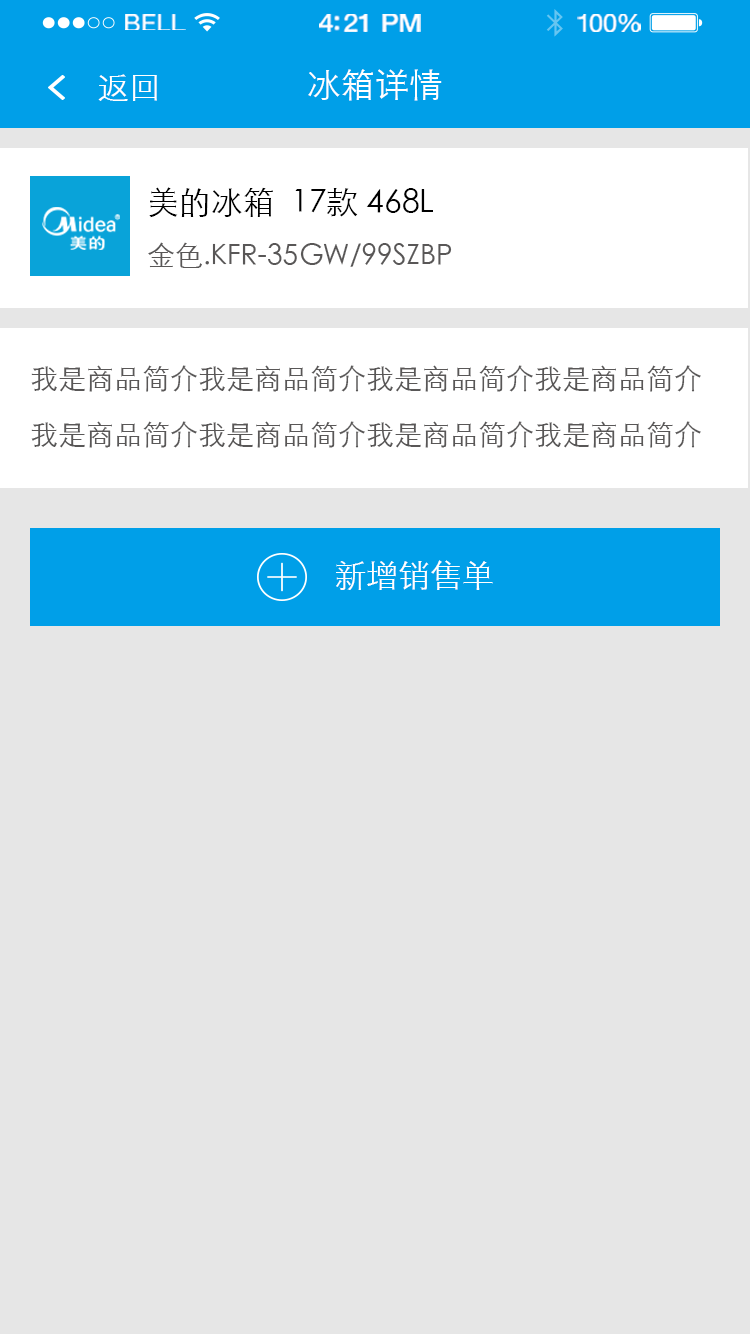
<style>
.page{position:relative;width:750px;height:1334px;background:#e6e6e6}
.page>*{position:absolute;margin:0}
.t1{font:23.3px "HelveticaNeue";letter-spacing:0.02em;color:#ffffff;scale:1.06 1}
.t2{font:25.3px "HelveticaNeue-Medium";letter-spacing:-0.02em;color:#ffffff;scale:1.06 1}
.t3{font:24.3px "HelveticaNeue";letter-spacing:-0.02em;color:#ffffff;scale:1.06 1}
.t4{font:32px "STXihei";color:#ffffff}
.t5{font:34px "STXihei";color:#ffffff}
.t6{font:28px/56px "STXihei";color:#595757}
.t7{font:32px/56px "STXihei";color:#000000}
</style>
<div class="page">
<p class="t1" style="left:125px;top:14px;width:61px;height:16px">BELL</p>
<p class="t2" style="left:319px;top:14px;width:102px;height:18px">4:21 PM</p>
<p class="t3" style="left:577px;top:14px;width:64px;height:18px">100%</p>
<p class="t4" style="left:98px;top:74px;width:59px;height:27px">返回</p>
<p class="t5" style="left:308px;top:69px;width:134px;height:32px">冰箱详情</p>
<p class="t6" style="left:148px;top:187px;width:304px;height:81px"><span class="t7">美的冰箱  17款 468L    <br></span>金色.KFR-35GW/99SZBP</p>
<p class="t6" style="left:31px;top:365px;width:670px;height:83px">我是商品简介我是商品简介我是商品简介我是商品简介我是商品简介我是商品简介我是商品简介我是商品简介</p>
<p class="t4" style="left:336px;top:560px;width:157px;height:30px">新增销售单</p>
</div>
